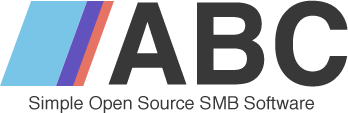
<style>
.page{position:relative;width:348px;height:113px;background:#ffffff}
.page>*{position:absolute;margin:0}
.t1{font:113.8px "Helvetica-Bold";color:#393838}
.t2{font:18px "Helvetica";color:#393838}
</style>
<div class="page">
<p class="t1" style="left:108px;top:0px;width:240px;height:87px">ABC</p>
<p class="t2" style="left:29px;top:96px;width:285px;height:17px">Simple Open Source SMB Software</p>
</div>
